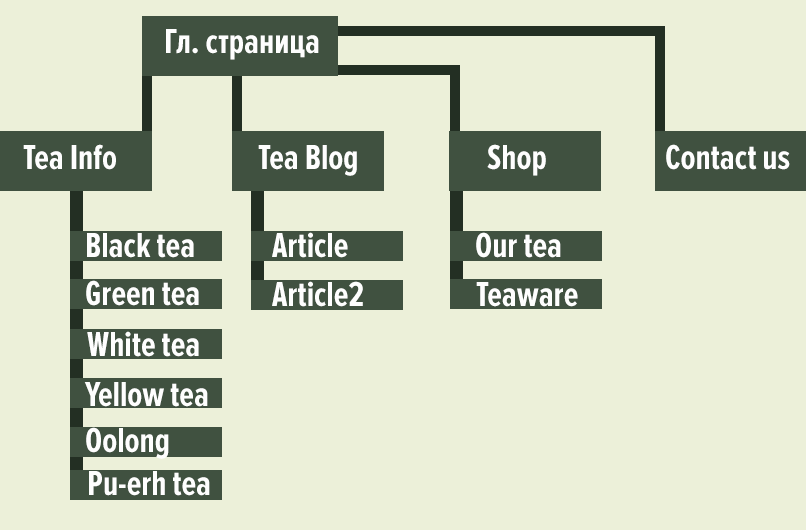
<style>
.page{position:relative;width:806px;height:530px;background:#ecf0d9}
.page>*{position:absolute;margin:0}
.t1{font:36px "ProximaNovaExCn-Bold";color:#fefefe}
</style>
<div class="page">
<p class="t1" style="left:166px;top:29px;width:153px;height:31px">Гл. страница</p>
<p class="t1" style="left:23px;top:144px;width:93px;height:26px">Tea Info</p>
<p class="t1" style="left:258px;top:145px;width:99px;height:31px">Tea Blog</p>
<p class="t1" style="left:487px;top:144px;width:59px;height:32px">Shop</p>
<p class="t1" style="left:666px;top:144px;width:124px;height:26px">Contact us</p>
<p class="t1" style="left:87px;top:233px;width:107px;height:25px">Black tea</p>
<p class="t1" style="left:272px;top:232px;width:76px;height:26px">Article</p>
<p class="t1" style="left:476px;top:232px;width:85px;height:26px">Our tea</p>
<p class="t1" style="left:86px;top:280px;width:113px;height:26px">Green tea</p>
<p class="t1" style="left:272px;top:281px;width:91px;height:26px">Article2</p>
<p class="t1" style="left:476px;top:282px;width:102px;height:25px">Teaware</p>
<p class="t1" style="left:87px;top:331px;width:112px;height:26px">White tea</p>
<p class="t1" style="left:84px;top:382px;width:124px;height:25px">Yellow tea</p>
<p class="t1" style="left:86px;top:427px;width:83px;height:32px">Oolong</p>
<p class="t1" style="left:89px;top:471px;width:121px;height:25px">Pu-erh tea</p>
</div>
